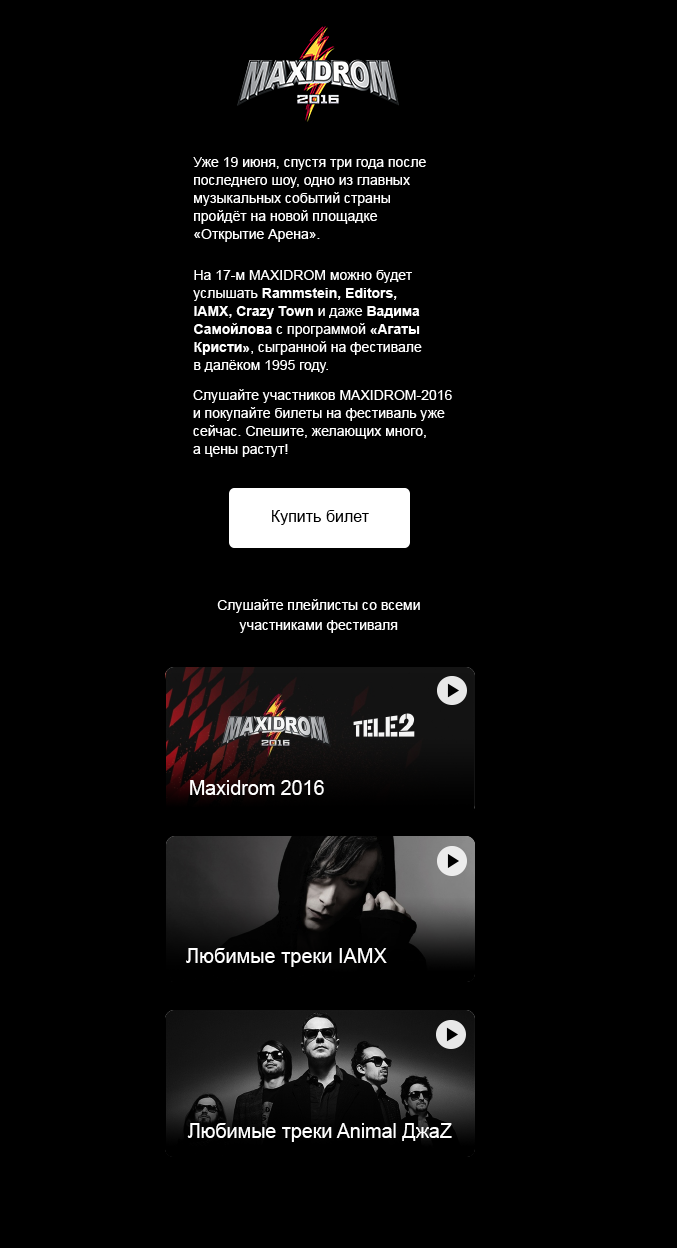
<style>
.page{position:relative;width:677px;height:1248px;background:#000000}
.page>*{position:absolute;margin:0}
.t1{font:14px/18px "ArialMT";color:#ffffff}
.t2{font:14px/18px "Arial-BoldMT";color:#ffffff}
.t3{font:16px "ArialMT";color:#000000}
.t4{font:14px/20px "ArialMT";color:#ffffff}
.t5{font:19.6px "ArialMT";color:#ffffff}
.t6{font:19.9px "ArialMT";color:#ffffff}
</style>
<div class="page">
<p class="t1" style="left:193px;top:157px;width:233px;height:85px">Уже 19 июня, спустя три года после последнего шоу, одно из главных музыкальных событий страны <br>пройдёт на новой площадке «Открытие Арена».</p>
<p class="t1" style="left:193px;top:270px;width:229px;height:103px">На 17-м MAXIDROM можно будет услышать <span class="t2">Rammstein, Editors, <br>IAMX, Сrazy Town</span> и даже <span class="t2">Вадима Самойлова</span> с программой<span class="t2"> «Агаты Кристи»</span>, сыгранной на фестивале <br>в далёком 1995 году.</p>
<p class="t1" style="left:193px;top:389px;width:259px;height:68px">Слушайте участников MAXIDROM-2016 и покупайте билеты на фестиваль уже сейчас. Спешите, желающих много, <br>а цены растут!</p>
<p class="t3" style="left:272px;top:510px;width:97px;height:15px">Купить билет</p>
<p class="t4" style="left:217px;top:599px;width:203px;height:34px;text-align:center">Слушайте плейлисты со всеми участниками фестиваля</p>
<p class="t5" style="left:190px;top:780px;width:134px;height:15px">Maxidrom 2016</p>
<p class="t6" style="left:186px;top:948px;width:201px;height:19px">Любимые треки IAMX</p>
<p class="t5" style="left:187px;top:1123px;width:265px;height:19px">Любимые треки Animal ДжаZ</p>
</div>
